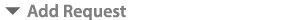
<style>
.page{position:relative;width:300px;height:20px;background:#ffffff}
.page>*{position:absolute;margin:0}
.t1{font:18px "MyriadPro-Semibold";color:#7f7f7f}
</style>
<div class="page">
<p class="t1" style="left:27px;top:4px;width:99px;height:17px">Add Request</p>
</div>
